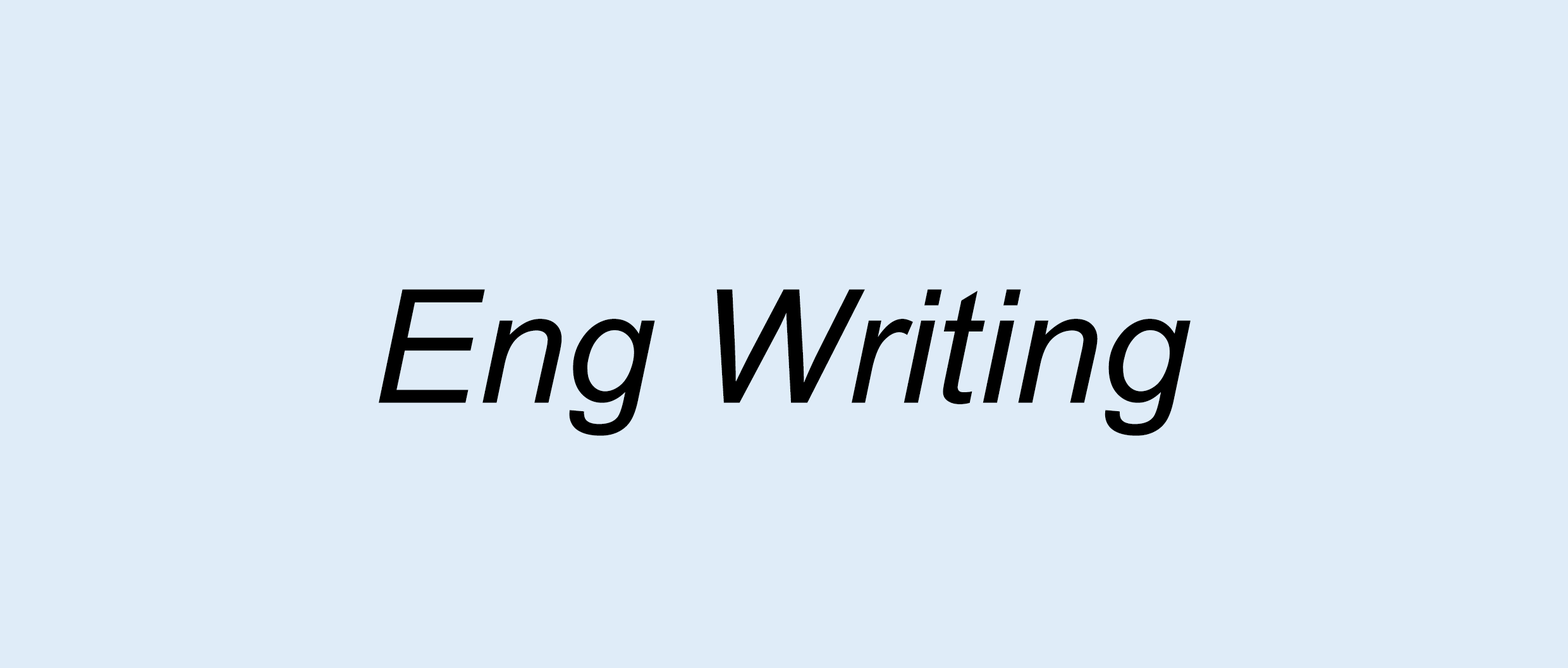
<style>
.page{position:relative;width:1568px;height:668px;background:#dfecf8}
.page>*{position:absolute;margin:0}
.t1{font:158.1px "Arial-ItalicMT";color:#000000}
</style>
<div class="page">
<p class="t1" style="left:379px;top:289px;width:812px;height:147px">Eng Writing</p>
</div>
